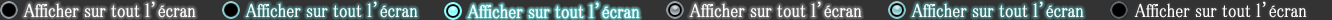
<style>
.page{position:relative;width:1332px;height:20px;background:#333333}
.page>*{position:absolute;margin:0}
.t1{font:19px "MS-PMincho";color:#ffffff;font-weight:bold;scale:0.84 1}
</style>
<div class="page">
<p class="t1" style="left:23px;top:1px;width:173px;height:17px">Afficher sur tout l’écran</p>
<p class="t1" style="left:245px;top:1px;width:173px;height:17px">Afficher sur tout l’écran</p>
<p class="t1" style="left:467px;top:2px;width:173px;height:17px">Afficher sur tout l’écran</p>
<p class="t1" style="left:689px;top:1px;width:173px;height:17px">Afficher sur tout l’écran</p>
<p class="t1" style="left:911px;top:1px;width:173px;height:17px">Afficher sur tout l’écran</p>
<p class="t1" style="left:1134px;top:1px;width:173px;height:17px">Afficher sur tout l’écran</p>
</div>
